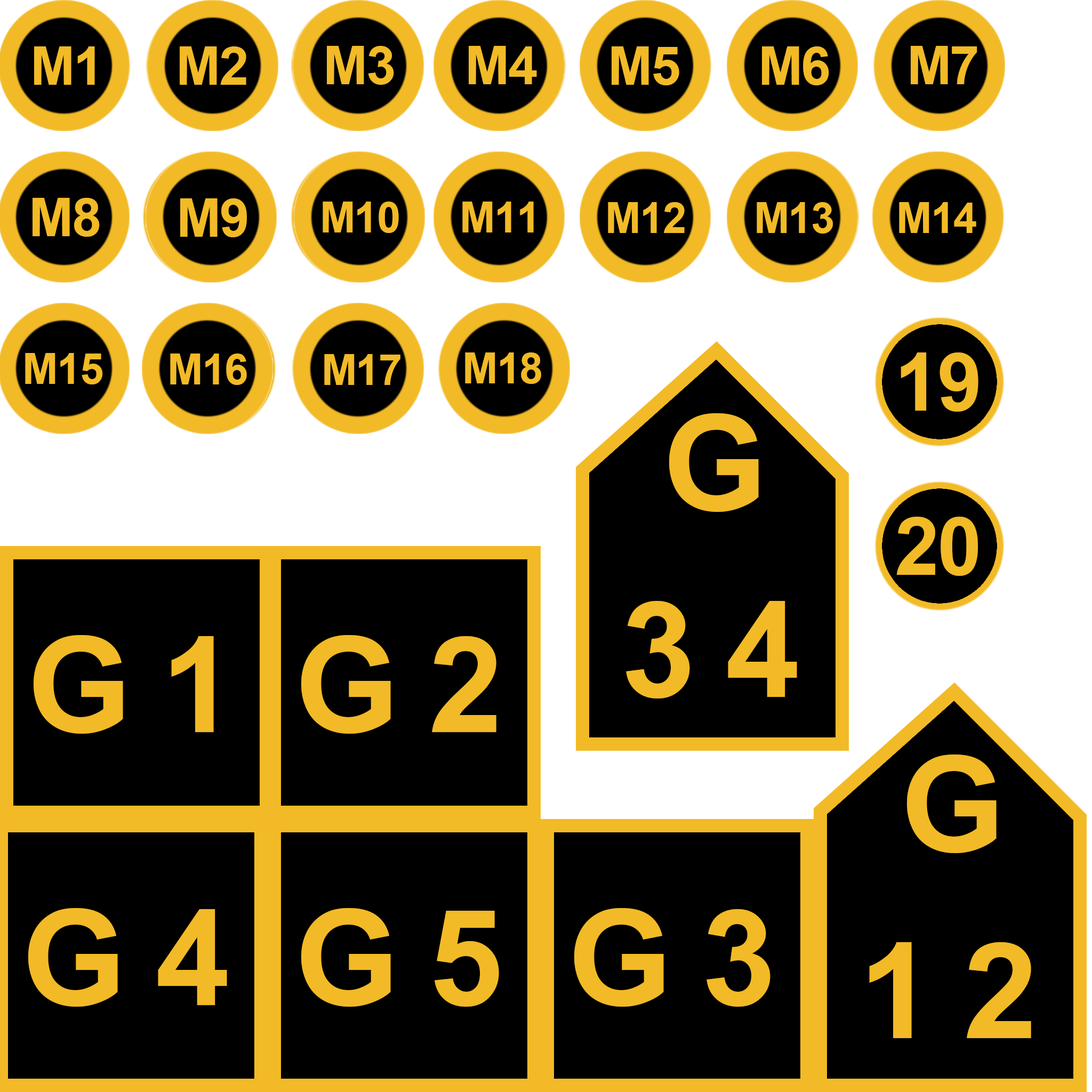
<style>
.page{position:relative;width:1092px;height:1092px;background:#000000}
.page>*{position:absolute;margin:0}
.t1{font:53.3px "Arial-BoldMT";letter-spacing:-0.025em;color:#f2ba26}
.t2{font:42.7px "Arial-BoldMT";letter-spacing:-0.025em;color:#f2ba26}
</style>
<div class="page">
<p class="t1" style="left:469px;top:46px;width:68px;height:38px">M4</p>
<p class="t1" style="left:612px;top:46px;width:67px;height:39px">M5</p>
<p class="t1" style="left:762px;top:46px;width:67px;height:39px">M6</p>
<p class="t1" style="left:911px;top:46px;width:66px;height:38px">M7</p>
<p class="t1" style="left:33px;top:198px;width:67px;height:39px">M8</p>
<p class="t1" style="left:180px;top:198px;width:67px;height:39px">M9</p>
<p class="t2" style="left:323px;top:202px;width:76px;height:31px">M10</p>
<p class="t2" style="left:462px;top:202px;width:72px;height:30px">M11</p>
<p class="t2" style="left:608px;top:202px;width:77px;height:31px">M12</p>
<p class="t2" style="left:757px;top:202px;width:76px;height:32px">M13</p>
<p class="t2" style="left:899px;top:202px;width:77px;height:31px">M14</p>
<p class="t2" style="left:25px;top:353px;width:78px;height:31px">M15</p>
<p class="t2" style="left:170px;top:354px;width:77px;height:31px">M16</p>
<p class="t2" style="left:465px;top:352px;width:76px;height:32px">M18</p>
<p class="t2" style="left:324px;top:354px;width:76px;height:31px">M17</p>
</div>
